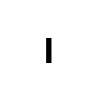
<style>
.page{position:relative;width:100px;height:100px;background:#ffffff}
.page>*{position:absolute;margin:0}
.t1{font:35px "OpenSans-Bold";color:#000000}
</style>
<div class="page">
<p class="t1" style="left:46px;top:38px;width:6px;height:25px">I</p>
</div>
